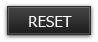
<style>
.page{position:relative;width:98px;height:42px}
.page>*{position:absolute;margin:0}
.t1{font:15px "Tahoma";color:#ffffff}
</style>
<div class="page">
<p class="t1" style="left:29px;top:16px;width:43px;height:11px">RESET</p>
</div>
